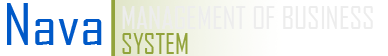
<style>
.page{position:relative;width:388px;height:56px;background:#ffffff}
.page>*{position:absolute;margin:0}
.t1{font:54.7px "AgencyFB-Reg";color:#0059c8;scale:1.22 1}
.t2{font:60px "AgencyFB-Reg";color:#92a33b}
.t3{font:30px "AgencyFB-Reg";color:#000000}
.t4{font:30px "AgencyFB-Reg";color:#ffffff}
.t5{font:27.8px "AgencyFB-Reg";color:#92a33b}
</style>
<div class="page">
<p class="t1" style="left:7px;top:3px;width:95px;height:42px">Nava</p>
<p class="t2" style="left:111px;top:0px;width:4px;height:56px">|</p>
<p class="t3" style="left:122px;top:6px;width:251px;height:23px">MANAGEMENT OF <span class="t4">BUSINESS</span></p>
<p class="t5" style="left:122px;top:33px;width:66px;height:21px">SYSTEM</p>
</div>
